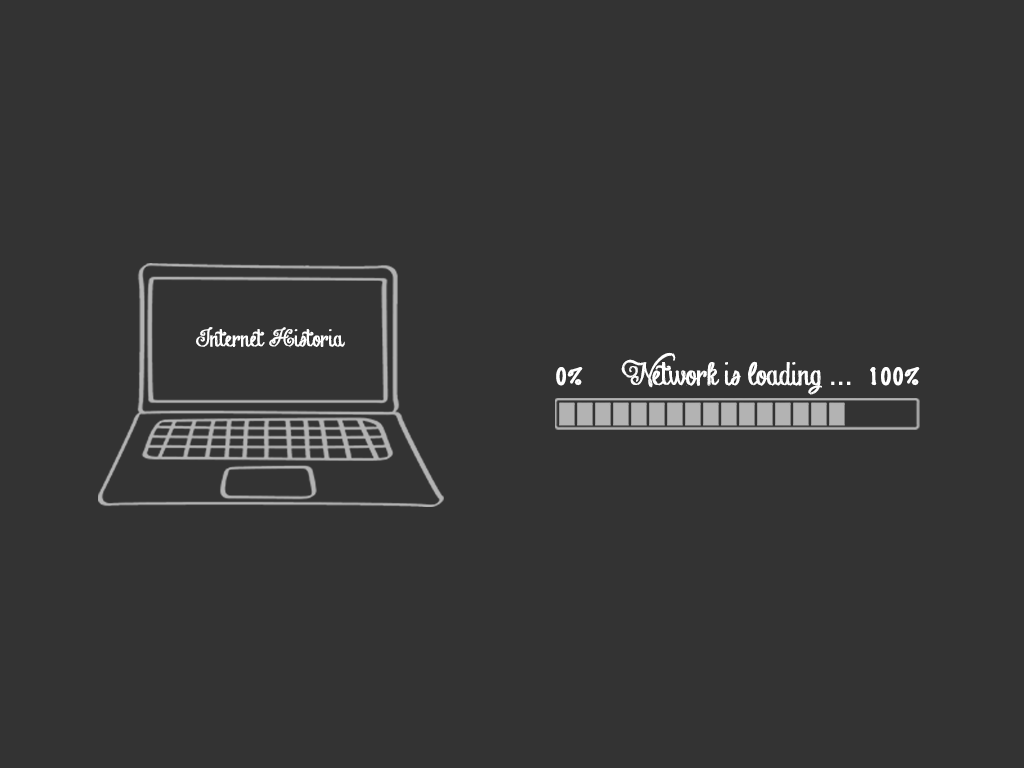
<style>
.page{position:relative;width:1024px;height:768px;background:#333333}
.page>*{position:absolute;margin:0}
.t1{font:21.4px "Chalk-hand-lettering-shadedDEM";color:#ffffff}
.t2{font:28.6px "Chalk-hand-lettering-shadedDEM";color:#ffffff}
.t3{font:28.6px "Helvetica";color:#ffffff}
.t4{font:21.4px "MarkerFelt-Thin";color:#ffffff}
</style>
<div class="page">
<p class="t1" style="left:196px;top:327px;width:149px;height:21px">Internet Historia</p>
<p class="t2" style="left:621px;top:352px;width:230px;height:43px">Network is loading <span class="t3">...</span></p>
<p class="t4" style="left:556px;top:367px;width:27px;height:19px">0%</p>
<p class="t4" style="left:870px;top:367px;width:50px;height:19px">100%</p>
</div>
